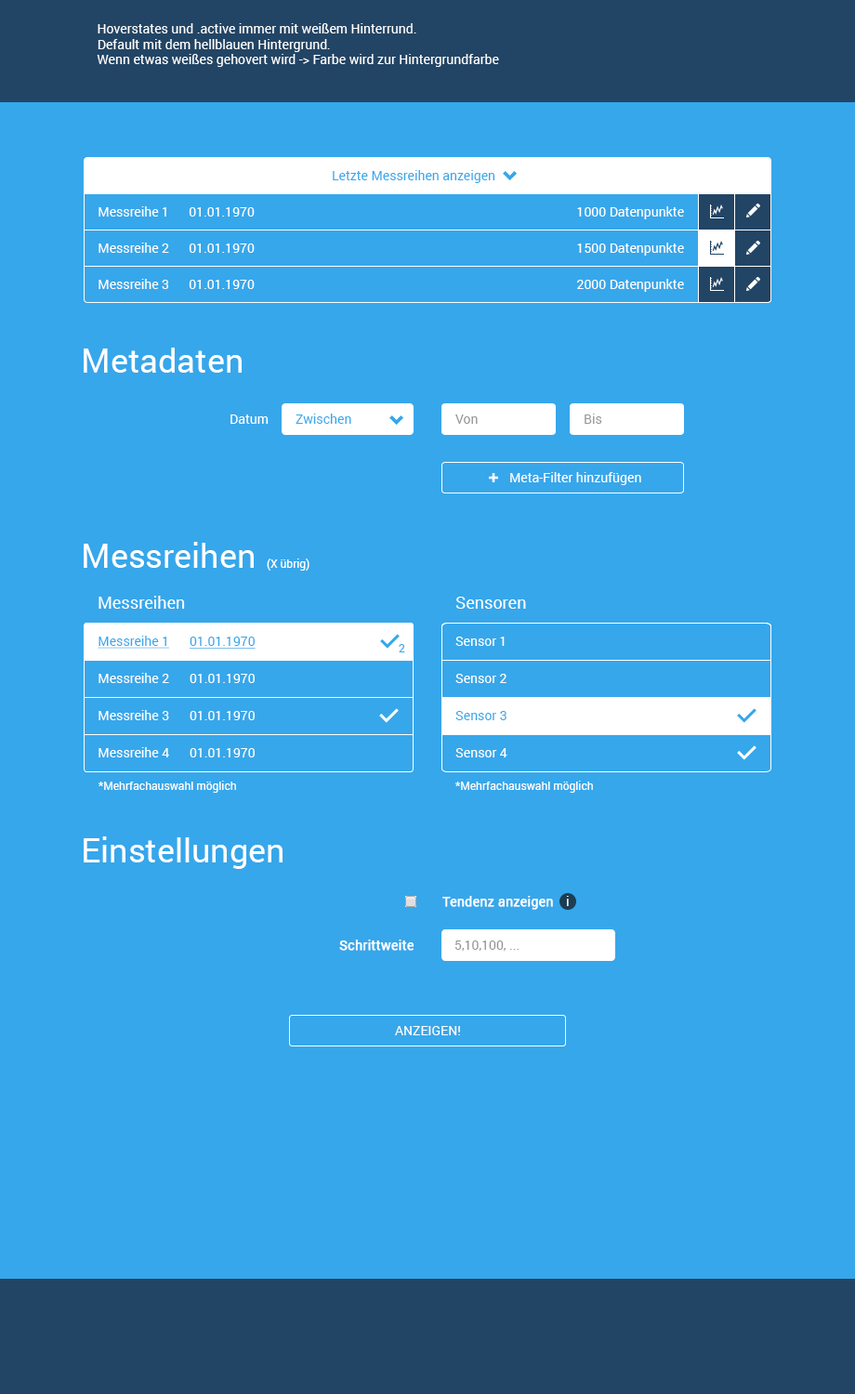
<style>
.page{position:relative;width:855px;height:1394px;background:#36a7eb}
.page>*{position:absolute;margin:0}
.t1{font:13px "Roboto-Regular";color:#ffffff}
.t2{font:13px "Roboto-Regular";color:#36a7eb}
.t3{font:33.5px "Roboto-Regular";color:#ffffff}
.t4{font:13px "Roboto-Regular";color:#969696}
.t5{font:11.2px "Roboto-Regular";color:#ffffff}
.t6{font:16.7px "Roboto-Regular";color:#ffffff}
.t7{font:13px "Roboto-Regular";color:#36a7eb;text-decoration:underline}
.t8{font:11.2px "Roboto-Regular";color:#36a7eb}
.t9{font:13px "Roboto-Regular";color:#ffffff;font-weight:bold}
</style>
<div class="page">
<p class="t1" style="left:97px;top:23px;width:402px;height:44px">Hoverstates und .active immer mit weißem Hinterrund.<br>Default mit dem hellblauen Hintergrund.<br>Wenn etwas weißes gehovert wird -&gt; Farbe wird zur Hintergrundfarbe</p>
<p class="t2" style="left:333px;top:170px;width:162px;height:13px">Letzte Messreihen anzeigen</p>
<p class="t1" style="left:99px;top:206px;width:67px;height:11px">Messreihe 1</p>
<p class="t1" style="left:189px;top:207px;width:66px;height:10px">01.01.1970</p>
<p class="t1" style="left:577px;top:206px;width:107px;height:13px">1000 Datenpunkte</p>
<p class="t1" style="left:99px;top:243px;width:70px;height:10px">Messreihe 2</p>
<p class="t1" style="left:189px;top:244px;width:66px;height:9px">01.01.1970</p>
<p class="t1" style="left:577px;top:243px;width:107px;height:13px">1500 Datenpunkte</p>
<p class="t1" style="left:99px;top:279px;width:69px;height:10px">Messreihe 3</p>
<p class="t1" style="left:189px;top:280px;width:66px;height:9px">01.01.1970</p>
<p class="t1" style="left:577px;top:279px;width:107px;height:13px">2000 Datenpunkte</p>
<p class="t3" style="left:84px;top:348px;width:158px;height:25px">Metadaten</p>
<p class="t2" style="left:296px;top:414px;width:55px;height:10px">Zwischen</p>
<p class="t4" style="left:585px;top:414px;width:17px;height:10px">Bis</p>
<p class="t1" style="left:231px;top:415px;width:38px;height:9px">Datum</p>
<p class="t4" style="left:455px;top:415px;width:23px;height:9px">Von</p>
<p class="t1" style="left:510px;top:472px;width:131px;height:13px">Meta-Filter hinzufügen</p>
<p class="t3" style="left:84px;top:542px;width:170px;height:26px">Messreihen</p>
<p class="t5" style="left:267px;top:559px;width:43px;height:12px">(X übrig)</p>
<p class="t6" style="left:99px;top:596px;width:86px;height:13px">Messreihen</p>
<p class="t6" style="left:455px;top:597px;width:71px;height:12px">Sensoren</p>
<p class="t7" style="left:98px;top:636px;width:72px;height:13px">Messreihe 1</p>
<p class="t7" style="left:190px;top:637px;width:66px;height:12px">01.01.1970</p>
<p class="t1" style="left:455px;top:637px;width:50px;height:9px">Sensor 1</p>
<p class="t8" style="left:399px;top:644px;width:6px;height:9px">2</p>
<p class="t1" style="left:99px;top:673px;width:70px;height:10px">Messreihe 2</p>
<p class="t1" style="left:190px;top:674px;width:65px;height:9px">01.01.1970</p>
<p class="t1" style="left:455px;top:674px;width:52px;height:9px">Sensor 2</p>
<p class="t1" style="left:99px;top:710px;width:70px;height:10px">Messreihe 3</p>
<p class="t1" style="left:190px;top:711px;width:65px;height:9px">01.01.1970</p>
<p class="t2" style="left:455px;top:711px;width:52px;height:9px">Sensor 3</p>
<p class="t1" style="left:99px;top:747px;width:70px;height:11px">Messreihe 4</p>
<p class="t1" style="left:190px;top:748px;width:65px;height:10px">01.01.1970</p>
<p class="t1" style="left:455px;top:748px;width:53px;height:10px">Sensor 4</p>
<p class="t5" style="left:99px;top:781px;width:137px;height:12px">*Mehrfachauswahl möglich</p>
<p class="t5" style="left:455px;top:781px;width:138px;height:12px">*Mehrfachauswahl möglich</p>
<p class="t3" style="left:84px;top:837px;width:199px;height:32px">Einstellungen</p>
<p class="t9" style="left:442px;top:896px;width:111px;height:14px">Tendenz anzeigen</p>
<p class="t1" style="left:567px;top:896px;width:2px;height:10px">i</p>
<p class="t9" style="left:339px;top:940px;width:76px;height:11px">Schrittweite</p>
<p class="t4" style="left:455px;top:941px;width:65px;height:10px">5,10,100, ...</p>
<p class="t1" style="left:395px;top:1026px;width:65px;height:10px">ANZEIGEN!</p>
</div>
